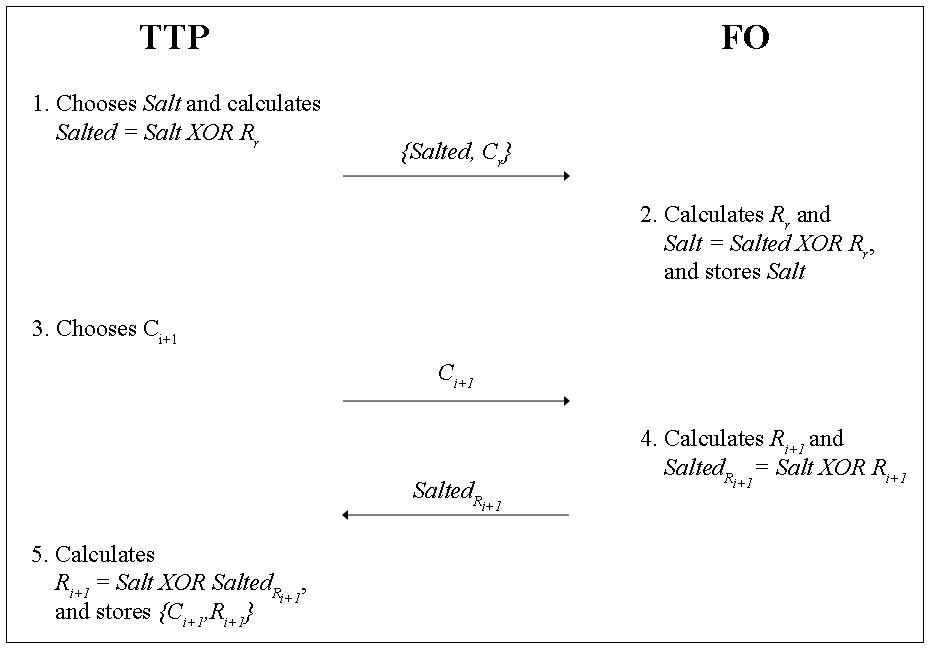
<style>
.page{position:relative;width:930px;height:648px;background:#ffffff}
.page>*{position:absolute;margin:0}
.t1{font:36px "TimesNewRomanPS-BoldMT";color:#000000}
.t2{font:24px "TimesNewRomanPS-ItalicMT";color:#000000}
.t3{font:24px "TimesNewRomanPSMT";color:#000000}
</style>
<div class="page">
<p class="t1" style="left:140px;top:25px;width:69px;height:24px">TTP</p>
<p class="t1" style="left:722px;top:25px;width:47px;height:24px">FO</p>
<p class="t2" style="left:35px;top:94px;width:285px;height:54px"><span class="t3">1. Chooses </span>Salt<span class="t3"> and calculates<br></span>    Salted = Salt XOR Rr</p>
<p class="t2" style="left:402px;top:142px;width:109px;height:25px">{Salted, Cr}</p>
<p class="t2" style="left:641px;top:205px;width:233px;height:74px"><span class="t3">2. Calculates </span>Rr<span class="t3"> and<br></span>    Salt = Salted XOR Rr<span class="t3">,<br>    and stores </span>Salt</p>
<p class="t3" style="left:33px;top:319px;width:143px;height:25px">3. Chooses Ci+1</p>
<p class="t2" style="left:439px;top:364px;width:34px;height:24px">Ci+1</p>
<p class="t2" style="left:641px;top:429px;width:265px;height:59px"><span class="t3">4. Calculates </span>Ri+1 <span class="t3">and<br></span>    SaltedRi+1= Salt XOR Ri+1</p>
<p class="t2" style="left:413px;top:481px;width:88px;height:30px">SaltedRi+1</p>
<p class="t2" style="left:32px;top:545px;width:274px;height:82px"><span class="t3">5. Calculates<br></span>    Ri+1 = Salt XOR SaltedRi+1<span class="t3">,<br>    and stores </span>{Ci+1,Ri+1}</p>
</div>
